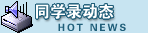
<style>
.page{position:relative;width:148px;height:33px;background:#c7e4f1}
.page>*{position:absolute;margin:0}
.t1{font:16px "FZDHTJW--GB1-0";color:#ffffff}
.t2{font:10px "FZDHTJW--GB1-0";letter-spacing:0.2em;color:#205f7a}
</style>
<div class="page">
<p class="t1" style="left:36px;top:4px;width:78px;height:15px">同学录动态</p>
<p class="t2" style="left:58px;top:23px;width:68px;height:8px">HOT NEWS</p>
</div>
